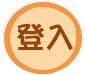
<style>
.page{position:relative;width:85px;height:75px;background:#fed9a5}
.page>*{position:absolute;margin:0}
.t1{font:29.2px "DFCaiDai-Bd-HK-BF";color:#92460c}
</style>
<div class="page">
<p class="t1" style="left:17px;top:23px;width:56px;height:28px">登入</p>
</div>
